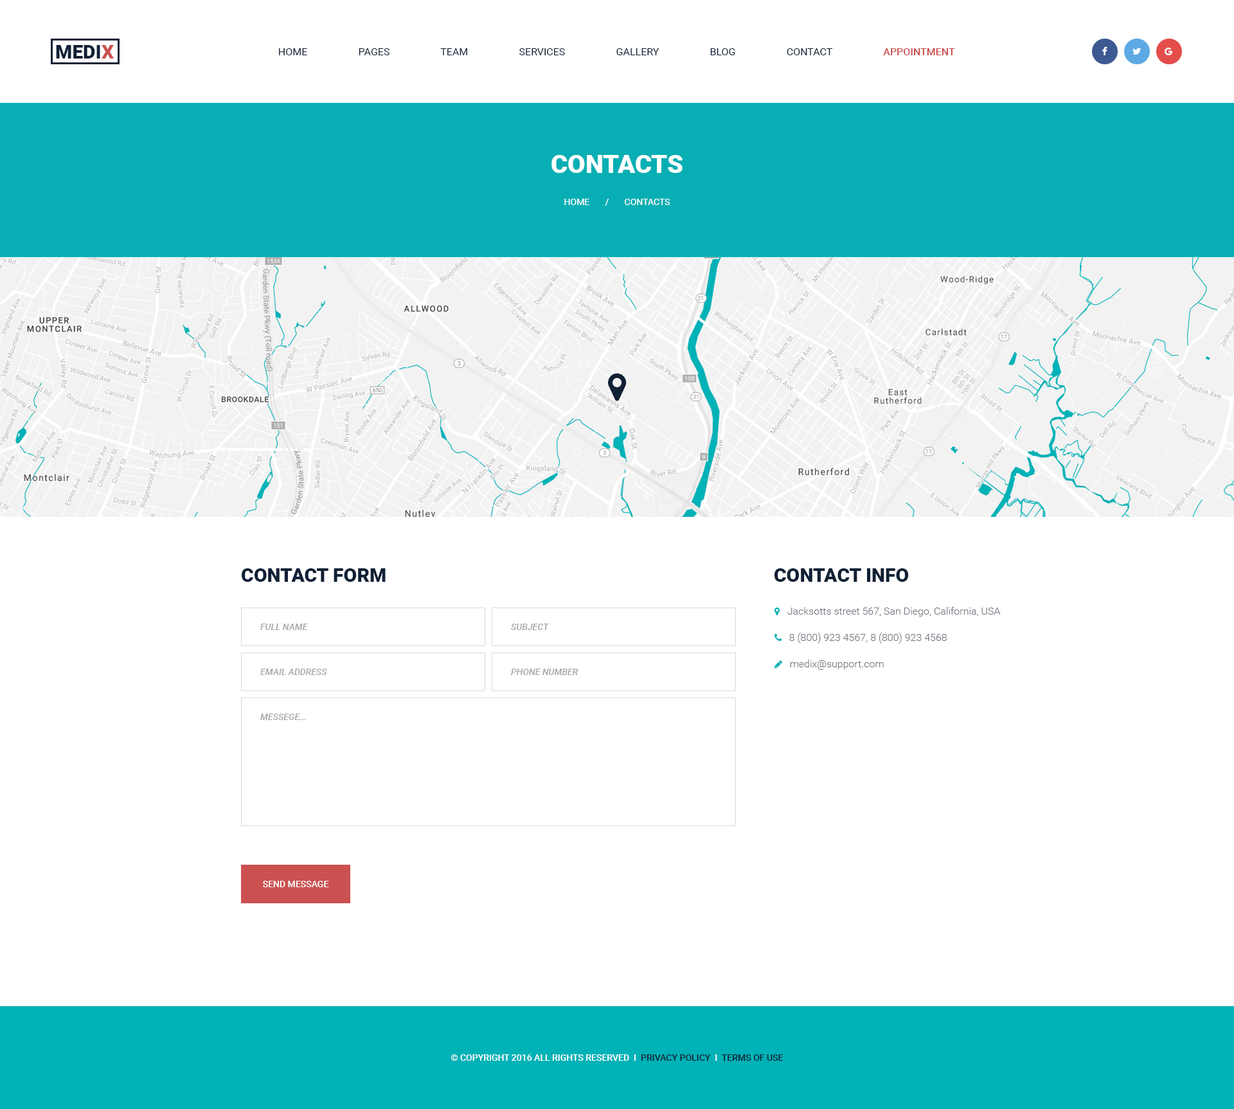
<style>
.page{position:relative;width:1234px;height:1109px;background:#ffffff}
.page>*{position:absolute;margin:0}
.t1{font:19.3px "Roboto-Black";color:#102035;text-transform:uppercase}
.t2{font:19.3px "Roboto-Black";color:#cb5151;text-transform:uppercase}
.t3{font:10.3px "Roboto-Regular";color:#102035;text-transform:uppercase}
.t4{font:10.3px "Roboto-Medium";color:#cb5151;text-transform:uppercase}
.t5{font:25.7px "Roboto-Black";color:#ffffff;text-transform:uppercase}
.t6{font:9px "Roboto-Regular";color:#ffffff;text-transform:uppercase}
.t7{font:9px "Roboto-MediumItalic";color:#a4a7ac;text-transform:uppercase}
.t8{font:9px "Roboto-Medium";color:#ffffff;text-transform:uppercase}
.t9{font:9px "Roboto-Medium";color:#102035;text-transform:uppercase}
</style>
<div class="page">
<p class="t1" style="left:56px;top:45px;width:58px;height:14px">Medi<span class="t2">x</span></p>
<p class="t3" style="left:279px;top:48px;width:676px;height:7px">Home                    Pages                    Team                    Services                    Gallery                    Blog                    Contact                    <span class="t4">Appointment</span></p>
<p class="t5" style="left:552px;top:155px;width:131px;height:18px">Contacts</p>
<p class="t6" style="left:564px;top:199px;width:106px;height:7px">Home       /       Contacts</p>
<p class="t1" style="left:242px;top:568px;width:144px;height:14px">Contact Form</p>
<p class="t1" style="left:775px;top:568px;width:134px;height:14px">contact info</p>
<p class="t7" style="left:260px;top:624px;width:48px;height:6px">Full Name</p>
<p class="t7" style="left:511px;top:624px;width:38px;height:6px">subject</p>
<p class="t7" style="left:260px;top:669px;width:67px;height:6px">email address</p>
<p class="t7" style="left:511px;top:669px;width:68px;height:6px">phone number</p>
<p class="t7" style="left:260px;top:714px;width:46px;height:6px">messege...</p>
<p class="t8" style="left:263px;top:881px;width:66px;height:6px">send message</p>
<p class="t8" style="left:451px;top:1054px;width:333px;height:7px">© Copyright 2016 All Rights Reserved  i  <span class="t9">Privacy Policy</span>  i  <span class="t9">Terms of Use</span></p>
</div>
